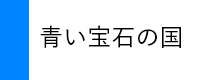
<style>
.page{position:relative;width:200px;height:80px;background:#ffffff}
.page>*{position:absolute;margin:0}
.t1{font:24px "YuGo-Medium";color:#000000}
</style>
<div class="page">
<p class="t1" style="left:40px;top:25px;width:141px;height:23px">青い宝石の国</p>
</div>
